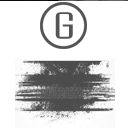
<style>
.page{position:relative;width:128px;height:128px;background:#ffffff}
.page>*{position:absolute;margin:0}
.t1{font:30px "TVpl";letter-spacing:0.05em;color:#545454}
</style>
<div class="page">
<p class="t1" style="left:55px;top:11px;width:18px;height:27px">G</p>
</div>
